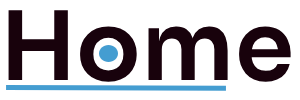
<style>
.page{position:relative;width:300px;height:100px;background:#ffffff}
.page>*{position:absolute;margin:0}
.t1{font:95.4px "Sora-SemiBold";color:#18020c}
</style>
<div class="page">
<p class="t1" style="left:8px;top:10px;width:283px;height:72px">Home</p>
</div>
